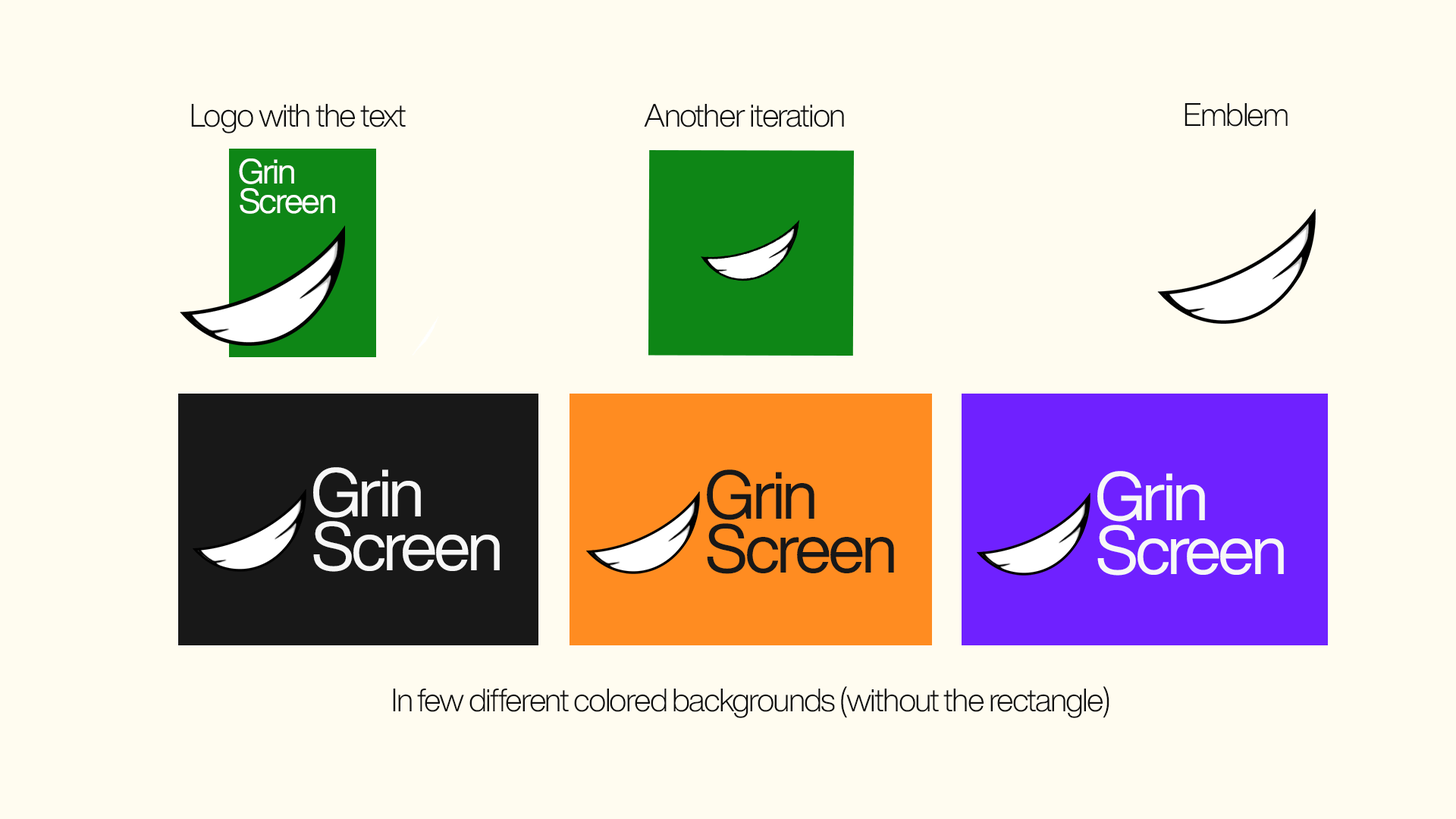
<style>
.page{position:relative;width:1456px;height:819px;background:#fffcf0}
.page>*{position:absolute;margin:0}
.t1{font:31.8px "HelveticaNowDisplay-Light";letter-spacing:-0.04em;color:#0e0e0e}
.t2{font:34.5px "HelveticaNowDisplay-Regular";letter-spacing:-0.05em;color:#ffffff}
.t3{font:67.4px "HelveticaNowDisplay-Regular";letter-spacing:-0.05em;color:#f7f7f7}
.t4{font:67.4px "HelveticaNowDisplay-Regular";letter-spacing:-0.05em;color:#181818}
</style>
<div class="page">
<p class="t1" style="left:191px;top:104px;width:215px;height:29px">Logo with the text</p>
<p class="t1" style="left:644px;top:104px;width:200px;height:23px">Another iteration</p>
<p class="t1" style="left:1185px;top:103px;width:103px;height:24px">Emblem</p>
<p class="t2" style="left:239px;top:158px;width:55px;height:26px">Grin</p>
<p class="t2" style="left:240px;top:188px;width:95px;height:26px">Screen</p>
<p class="t3" style="left:313px;top:467px;width:108px;height:51px">Grin</p>
<p class="t4" style="left:707px;top:469px;width:107px;height:51px">Grin</p>
<p class="t3" style="left:1097px;top:471px;width:108px;height:51px">Grin</p>
<p class="t3" style="left:313px;top:521px;width:187px;height:51px">Screen</p>
<p class="t4" style="left:707px;top:523px;width:187px;height:51px">Screen</p>
<p class="t3" style="left:1097px;top:525px;width:187px;height:51px">Screen</p>
<p class="t1" style="left:393px;top:686px;width:716px;height:32px">In few different colored backgrounds (without the rectangle)</p>
</div>
